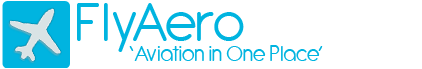
<style>
.page{position:relative;width:422px;height:69px;background:#ffffff}
.page>*{position:absolute;margin:0}
.t1{font:60px "Antipasto";color:#00b4e0}
.t2{font:24px "Antipasto";color:#00b4e0}
</style>
<div class="page">
<p class="t1" style="left:77px;top:3px;width:167px;height:49px">FlyAero</p>
<p class="t2" style="left:129px;top:45px;width:194px;height:16px">‘Aviation in One Place’</p>
</div>
